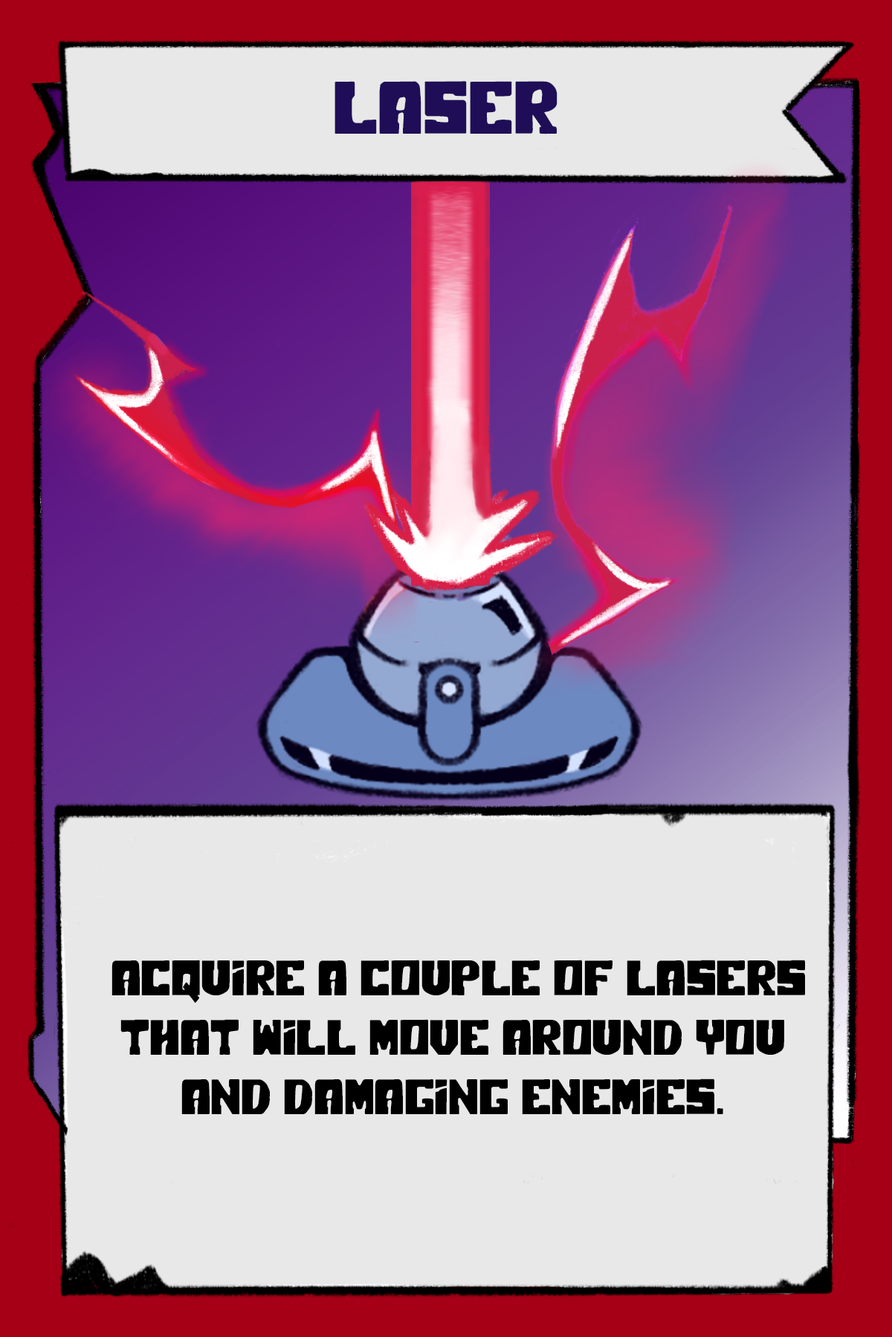
<style>
.page{position:relative;width:892px;height:1337px;background:#e8e8e8}
.page>*{position:absolute;margin:0}
.t1{font:74.3px "PolarPress";color:#1f0e57}
.t2{font:49.5px "PolarPress";color:#000000}
</style>
<div class="page">
<p class="t1" style="left:334px;top:81px;width:223px;height:53px">LASER</p>
<p class="t2" style="left:111px;top:960px;width:694px;height:155px;text-align:center">acquire a couple of lasers that will move around you and damaging enemies.</p>
</div>
